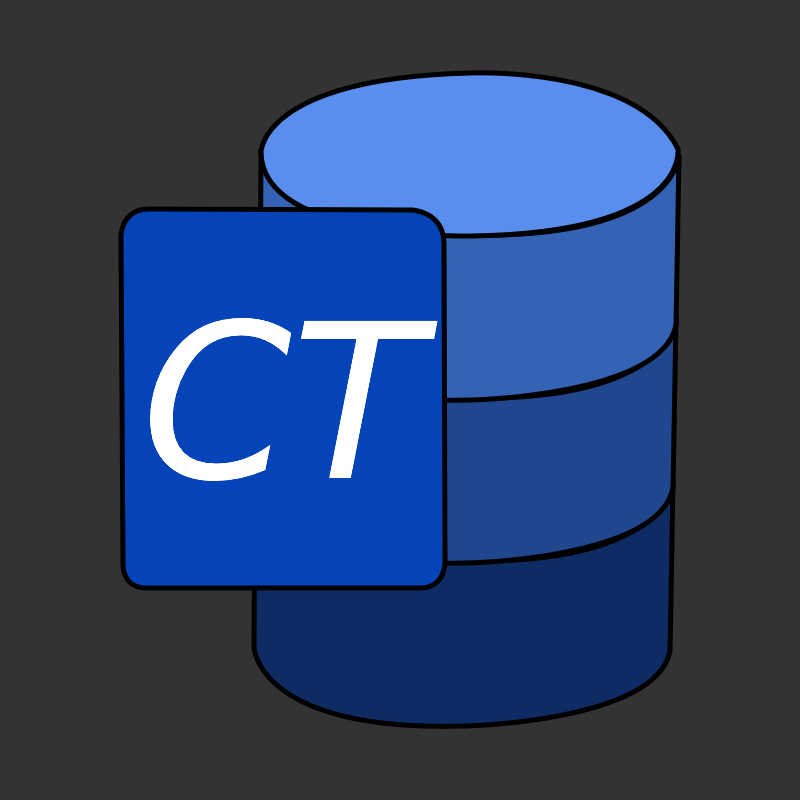
<style>
.page{position:relative;width:800px;height:800px;background:#333333}
.page>*{position:absolute;margin:0}
.t1{font:215.2px "DejaVuSans-Oblique";color:#ffffff}
</style>
<div class="page">
<p class="t1" style="left:150px;top:318px;width:288px;height:163px">CT</p>
</div>
